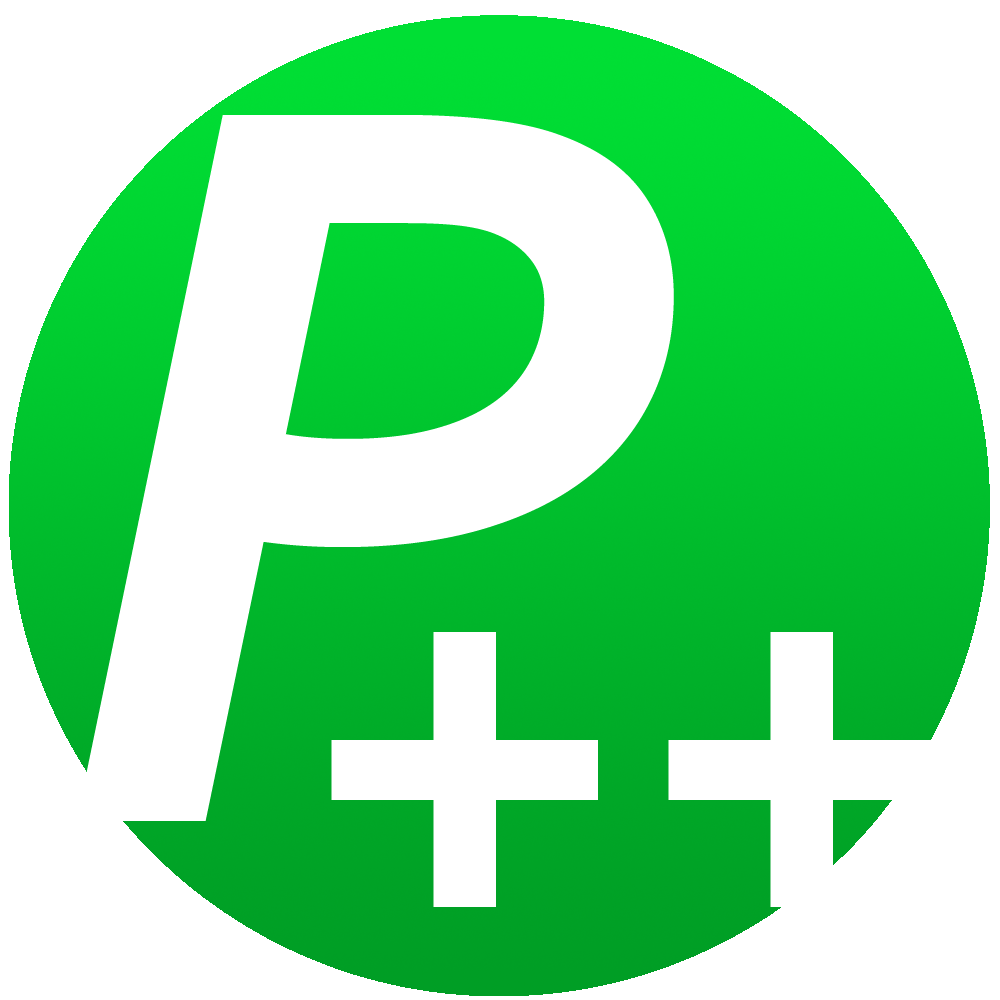
<style>
.page{position:relative;width:1000px;height:1000px;background:#ffffff}
.page>*{position:absolute;margin:0}
.t1{font:1081.4px "Corbel-BoldItalic";color:#ffffff}
.t2{font:639.6px "Corbel-BoldItalic";color:#ffffff}
</style>
<div class="page">
<p class="t1" style="left:76px;top:115px;width:598px;height:706px">P</p>
<p class="t2" style="left:331px;top:632px;width:604px;height:275px">++</p>
</div>
